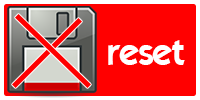
<style>
.page{position:relative;width:200px;height:100px;background:#ff0000}
.page>*{position:absolute;margin:0}
.t1{font:36px "ELEGANCE";color:#ffffff}
</style>
<div class="page">
<p class="t1" style="left:108px;top:40px;width:77px;height:25px">reset</p>
</div>
